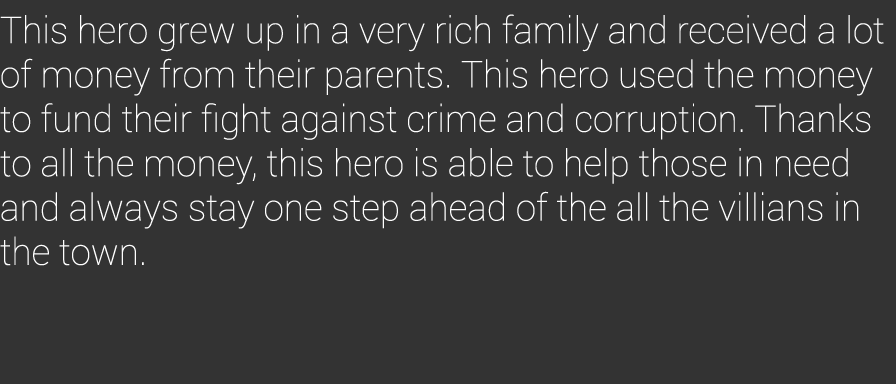
<style>
.page{position:relative;width:896px;height:384px;background:#333333}
.page>*{position:absolute;margin:0}
.t1{font:36.9px "Roboto-Thin";color:#ffffff}
</style>
<div class="page">
<p class="t1" style="left:0px;top:14px;width:884px;height:252px">This hero grew up in a very rich family and received a lot of money from their parents. This hero used the money to fund their fight against crime and corruption. Thanks to all the money, this hero is able to help those in need and always stay one step ahead of the all the villians in the town.</p>
</div>
